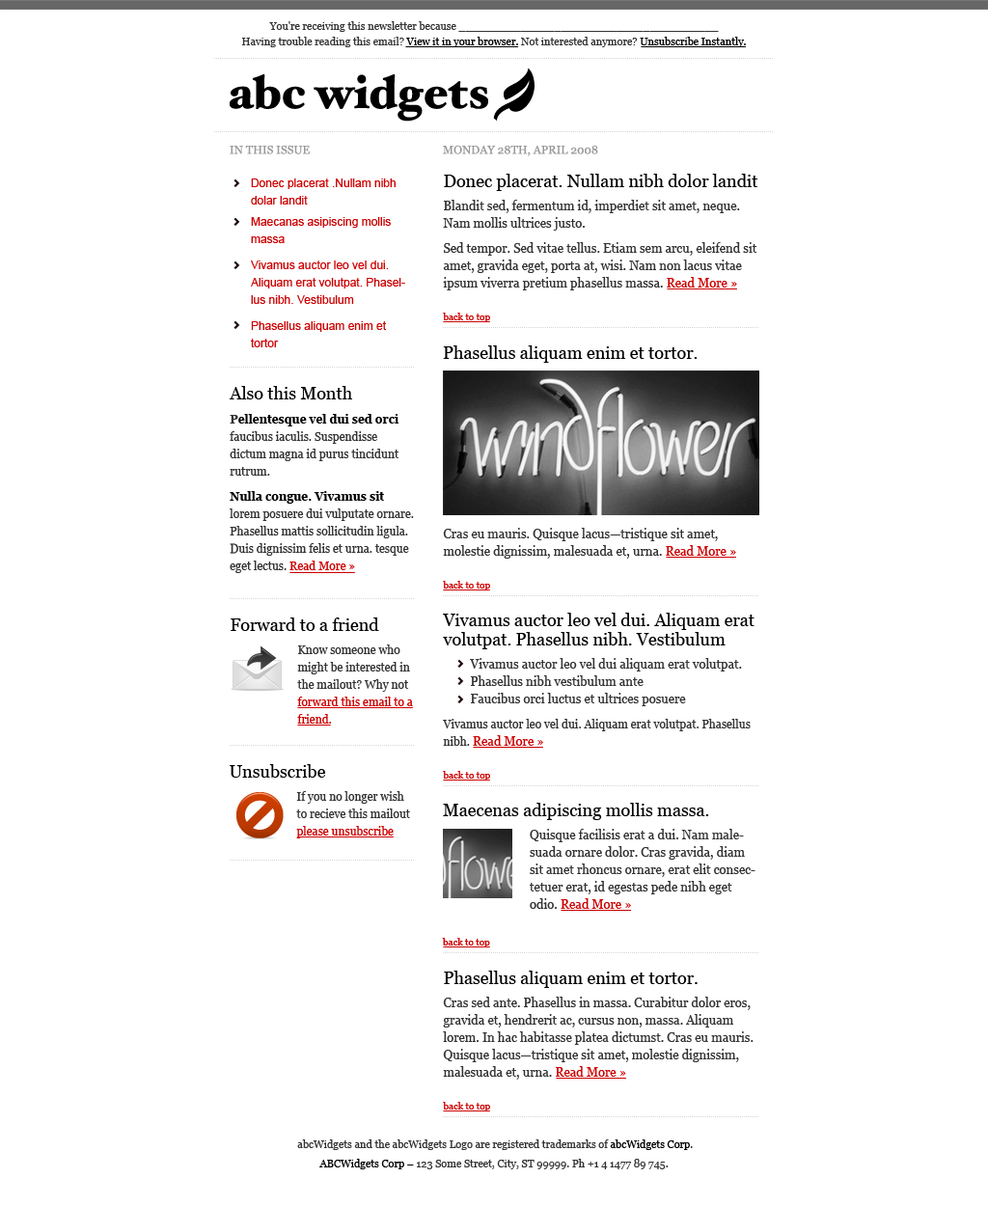
<style>
.page{position:relative;width:988px;height:1206px;background:#ffffff}
.page>*{position:absolute;margin:0}
.t1{font:10.6px/15.4px "Georgia";color:#333333}
.t2{font:10.6px/15.4px "Georgia";color:#000000}
.t3{font:11.6px "Georgia";color:#999999;text-transform:uppercase}
.t4{font:12.5px/17.4px "Georgia";color:#333333}
.t5{font:17.4px/17.4px "Georgia";color:#000000}
.t6{font:12.5px/17.4px "Georgia";color:#cc0000}
.t7{font:9.7px/17.4px "Georgia";color:#cc0000}
.t8{font:11.6px/17.4px "ArialMT";color:#cc0000}
.t9{font:11.6px/8.7px "ArialMT";color:#cc0000}
.t10{font:11.6px/3.9px "ArialMT";color:#cc0000}
.t11{font:17.4px "Georgia";color:#000000}
.t12{font:11.6px/17.4px "Georgia";color:#333333}
.t13{font:11.6px/17.4px "Georgia-Bold";color:#333333}
.t14{font:11.6px/17.4px "Georgia-Bold";color:#000000}
.t15{font:11.6px/17.4px "Georgia-Bold";color:#010101}
.t16{font:11.6px/17.4px "Georgia";color:#cc0000}
.t17{font:17.4px/19.3px "Georgia";color:#000000}
.t18{font:9.7px/21.2px "Georgia";color:#cc0000}
</style>
<div class="page">
<p class="t1" style="left:241px;top:21px;width:505px;height:26px;text-align:center">You're receiving this newsletter because ______________________________________<br>Having trouble reading this email? <span class="t2">View it in your browser.</span> Not interested anymore? <span class="t2">Unsubscribe Instantly.</span></p>
<p class="t3" style="left:230px;top:145px;width:81px;height:9px">in this issue</p>
<p class="t3" style="left:443px;top:145px;width:155px;height:11px">Monday 28th, april 2008</p>
<p class="t4" style="left:443px;top:174px;width:316px;height:148px"><span class="t5">Donec placerat. Nullam nibh dolor landit<br></span>Blandit sed, fermentum id, imperdiet sit amet, neque. Nam mollis ultrices justo.<br>Sed tempor. Sed vitae tellus. Etiam sem arcu, eleifend sit amet, gravida eget, porta at, wisi. Nam non lacus vitae ipsum viverra pretium phasellus massa. <span class="t6">Read More »<br></span><span class="t7">back to top</span></p>
<p class="t8" style="left:251px;top:179px;width:154px;height:168px">Donec placerat .Nullam nibh dolar landit<span class="t9"><br></span><span class="t10"><br></span>Maecanas asipiscing mollis massa<span class="t9"><br><br></span>Vivamus auctor leo vel dui. Aliquam erat volutpat. Phasellus nibh. Vestibulum<span class="t9"><br><br></span>Phasellus aliquam enim et tortor</p>
<p class="t11" style="left:443px;top:346px;width:255px;height:17px">Phasellus aliquam enim et tortor.</p>
<p class="t12" style="left:229px;top:386px;width:185px;height:187px"><span class="t5">Also this Month<br></span><span class="t13">P</span><span class="t14">ellentesque vel dui sed orci </span>faucibus iaculis. Suspendisse dictum magna id purus tincidunt rutrum.<br><span class="t15">Nulla congue. Vivamus sit  </span>lorem posuere dui vulputate ornare.<br>Phasellus mattis sollicitudin ligula. Duis dignissim felis et urna. tesque eget lectus. <span class="t16">Read More »</span></p>
<p class="t4" style="left:443px;top:528px;width:293px;height:63px">Cras eu mauris. Quisque lacus—tristique sit amet, molestie dignissim, malesuada et, urna. <span class="t6">Read More »<br></span><span class="t7">back to top</span></p>
<p class="t12" style="left:231px;top:618px;width:182px;height:106px"><span class="t5">Forward to a friend<br></span>Know someone who might be interested in the mailout? Why not <span class="t16">forward this email to a friend.</span></p>
<p class="t4" style="left:443px;top:613px;width:312px;height:168px"><span class="t17">Vivamus auctor leo vel dui. Aliquam erat volutpat. Phasellus nibh. Vestibulum <br></span>Vivamus auctor leo vel dui aliquam erat volutpat. Phasellus nibh vestibulum ante<br>Faucibus orci luctus et ultrices posuere<br><span class="t12">Vivamus auctor leo vel dui. Aliquam erat volutpat. Phasellus nibh. </span><span class="t6">Read More »<br></span><span class="t7">back to top</span></p>
<p class="t12" style="left:230px;top:764px;width:180px;height:75px"><span class="t5">Unsubscribe<br></span>If you no longer wish to recieve this mailout <span class="t16">please unsubscribe</span></p>
<p class="t4" style="left:442px;top:803px;width:314px;height:145px"><span class="t5">Maecenas adipiscing mollis massa.<br></span>Quisque facilisis erat a dui. Nam malesuada ornare dolor. Cras gravida, diam sit amet rhoncus ornare, erat elit consectetuer erat, id egestas pede nibh eget odio. <span class="t6">Read More »<br></span><span class="t18">back to top</span></p>
<p class="t4" style="left:443px;top:971px;width:311px;height:141px"><span class="t5">Phasellus aliquam enim et tortor.<br></span>Cras sed ante. Phasellus in massa. Curabitur dolor eros, gravida et, hendrerit ac, cursus non, massa. Aliquam lorem. In hac habitasse platea dictumst. Cras eu mauris. Quisque lacus—tristique sit amet, molestie dignissim, malesuada et, urna. <span class="t6">Read More »<br></span><span class="t7">back to top</span></p>
<p class="t1" style="left:297px;top:1140px;width:396px;height:30px;text-align:center">abcWidgets and the abcWidgets Logo are registered trademarks of <span class="t2">abcWidgets Corp</span>. <br><span class="t2">ABCWidgets Corp – </span>123 Some Street, City, ST 99999. Ph +1 4 1477 89 745.</p>
</div>
